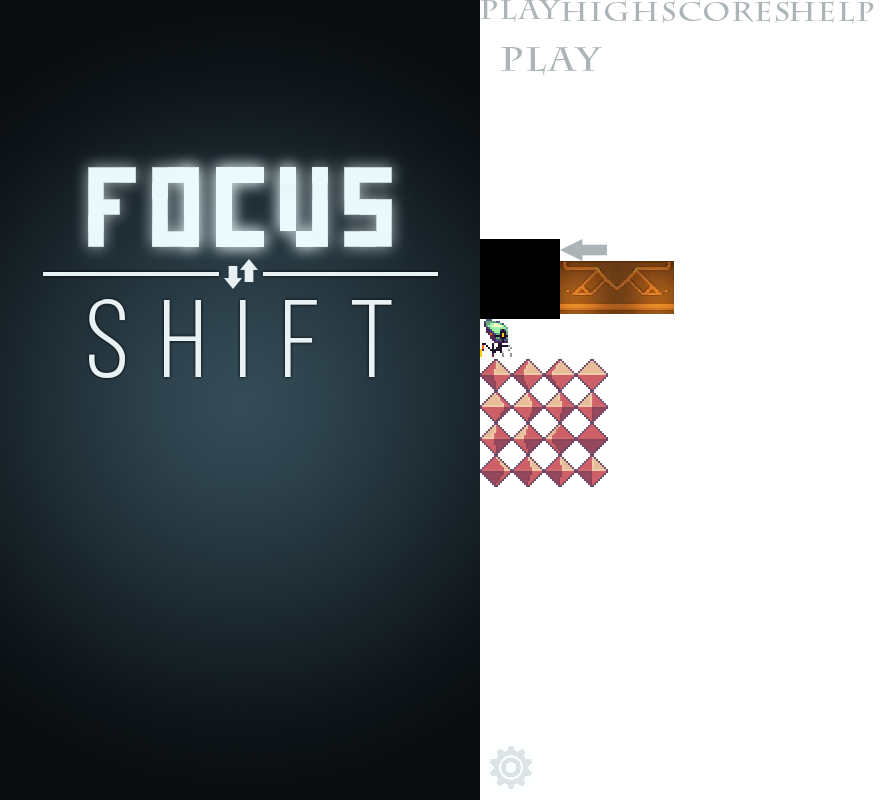
<style>
.page{position:relative;width:880px;height:800px;background:#ffffff}
.page>*{position:absolute;margin:0}
.t1{font:26.7px "CharlemagneStd-Bold";letter-spacing:0.05em;color:#abb5b8;scale:1.09 1}
</style>
<div class="page">
<p class="t1" style="left:480px;top:0px;width:81px;height:23px">play</p>
<p class="t1" style="left:561px;top:0px;width:228px;height:24px">highscores</p>
<p class="t1" style="left:789px;top:0px;width:85px;height:25px">help</p>
</div>
